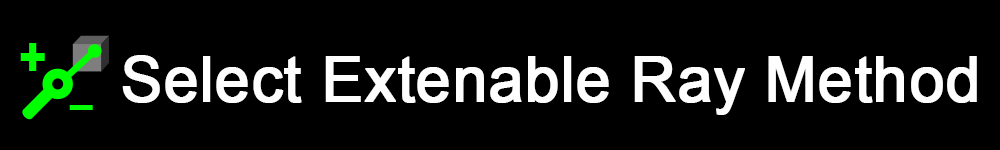
<style>
.page{position:relative;width:1000px;height:150px;background:#000000}
.page>*{position:absolute;margin:0}
.t1{font:62.5px "ArialMT";color:#fffefe;font-weight:bold}
</style>
<div class="page">
<p class="t1" style="left:122px;top:55px;width:855px;height:60px">Select Extenable Ray Method</p>
</div>
